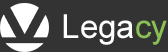
<style>
.page{position:relative;width:168px;height:52px;background:#333333}
.page>*{position:absolute;margin:0}
.t1{font:32.9px "ArialMT";color:#ffffff}
.t2{font:32.9px "ArialMT";color:#8ac054}
</style>
<div class="page">
<p class="t1" style="left:63px;top:14px;width:104px;height:31px">Lega<span class="t2">cy</span></p>
</div>
